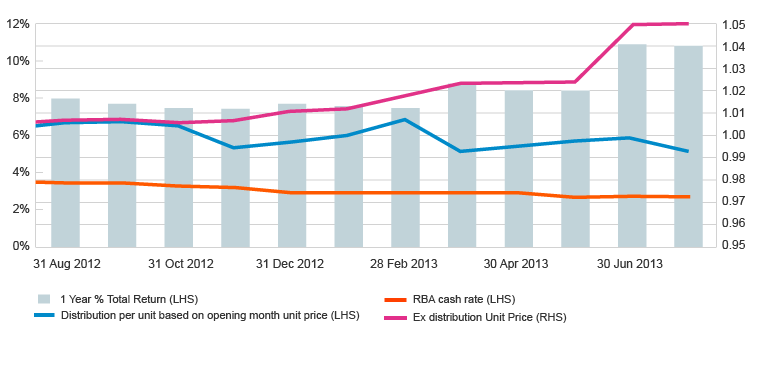
<style>
.page{position:relative;width:763px;height:380px;background:#ffffff}
.page>*{position:absolute;margin:0}
.t1{font:12px/37px "ArialMT";color:#333333}
.t2{font:12px/22px "ArialMT";color:#333333}
.t3{font:12px "ArialMT";color:#333333}
.t4{font:11px "ArialMT";color:#333333}
</style>
<div class="page">
<p class="t1" style="left:7px;top:19px;width:23px;height:231px;text-align:right">12%<br>10%<br>8%<br>6%<br>4%<br>2%<br>0%</p>
<p class="t2" style="left:722px;top:20px;width:23px;height:229px">1.05<br>1.04<br>1.03<br>1.02<br>1.01<br>1.00<br>0.99<br>0.98<br>0.97<br>0.96<br>0.95</p>
<p class="t3" style="left:33px;top:259px;width:68px;height:11px">31 Aug 2012</p>
<p class="t3" style="left:148px;top:259px;width:66px;height:9px">31 Oct 2012</p>
<p class="t3" style="left:256px;top:259px;width:68px;height:9px">31 Dec 2012</p>
<p class="t3" style="left:370px;top:259px;width:68px;height:9px">28 Feb 2013</p>
<p class="t3" style="left:484px;top:259px;width:64px;height:11px">30 Apr 2013</p>
<p class="t3" style="left:597px;top:259px;width:66px;height:9px">30 Jun 2013</p>
<p class="t4" style="left:61px;top:295px;width:137px;height:10px">1 Year % Total Return (LHS)</p>
<p class="t4" style="left:413px;top:295px;width:102px;height:10px">RBA cash rate (LHS)</p>
<p class="t4" style="left:61px;top:311px;width:299px;height:10px">Distribution per unit based on opening month unit price (LHS)</p>
<p class="t4" style="left:413px;top:313px;width:154px;height:10px">Ex distribution Unit Price (RHS)</p>
</div>
